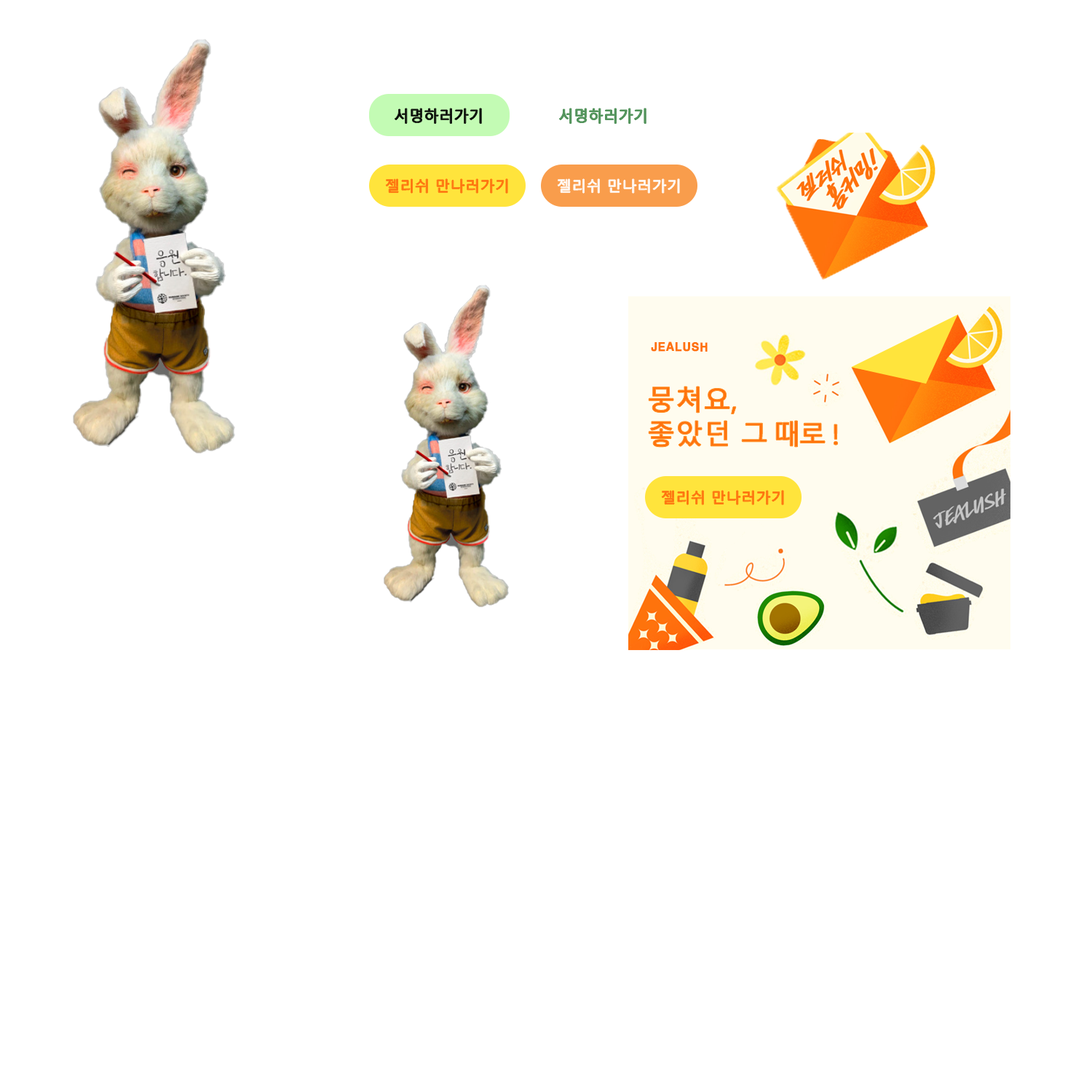
<style>
.page{position:relative;width:1092px;height:1092px;background:#ffffff}
.page>*{position:absolute;margin:0}
.t1{font:15.6px "MalgunGothic";color:#000000;font-weight:bold;scale:0.93 1}
.t2{font:15.6px "MalgunGothic";color:#53945c;font-weight:bold;scale:0.93 1}
.t3{font:14.6px "MalgunGothic";color:#fe6e0d;font-weight:bold}
.t4{font:14.6px "MalgunGothic";color:#ffffff;font-weight:bold}
.t5{font:11.4px "H2gtrE";color:#ff720e;font-weight:bold;scale:0.96 1}
.t6{font:27.2px/34.1px "MalgunGothic";color:#ff720e;font-weight:bold}
.t7{font:27.2px/34.1px "MalgunGothic";letter-spacing:-0.1em;color:#ff720e;font-weight:bold}
</style>
<div class="page">
<p class="t1" style="left:395px;top:108px;width:87px;height:16px">서명하러가기</p>
<p class="t2" style="left:559px;top:108px;width:87px;height:16px">서명하러가기</p>
<p class="t3" style="left:386px;top:178px;width:122px;height:16px">젤리쉬 만나러가기</p>
<p class="t4" style="left:558px;top:178px;width:122px;height:16px">젤리쉬 만나러가기</p>
<p class="t5" style="left:651px;top:341px;width:57px;height:11px">JEALUSH</p>
<p class="t6" style="left:649px;top:387px;width:189px;height:60px">뭉쳐요,<br>좋았던 <span class="t7">그 때로 !</span></p>
<p class="t3" style="left:662px;top:490px;width:122px;height:15px">젤리쉬 만나러가기</p>
</div>
